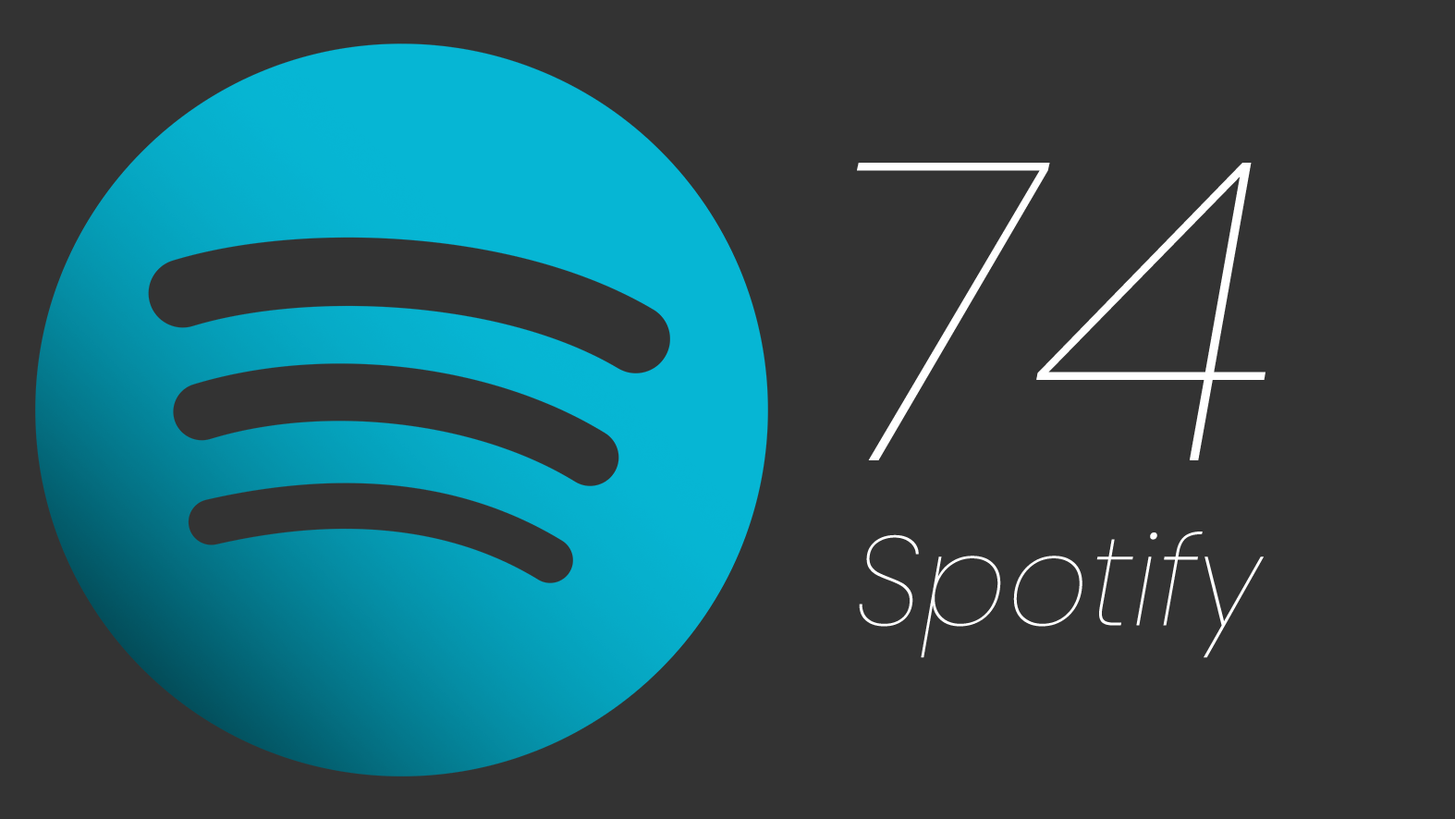
<style>
.page{position:relative;width:1455px;height:819px;background:#333333}
.page>*{position:absolute;margin:0}
.t1{font:724.6px "Poppins-ThinItalic";color:#ffffff}
.t2{font:217.4px "Poppins-ThinItalic";color:#ffffff}
</style>
<div class="page">
<p class="t1" style="left:857px;top:163px;width:409px;height:297px">74</p>
<p class="t2" style="left:859px;top:532px;width:405px;height:126px">Spotify</p>
</div>
